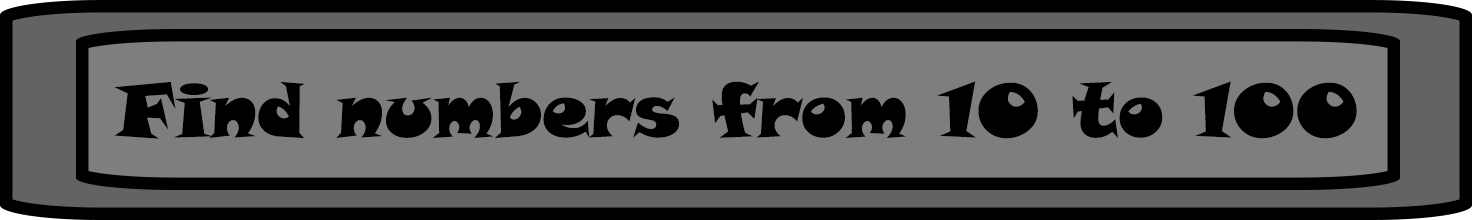
<style>
.page{position:relative;width:1472px;height:220px;background:#7e7e7e}
.page>*{position:absolute;margin:0}
.t1{font:75px "SnapITC-Regular";color:#000000}
</style>
<div class="page">
<p class="t1" style="left:114px;top:81px;width:1243px;height:58px">Find numbers from 10 to 100</p>
</div>
